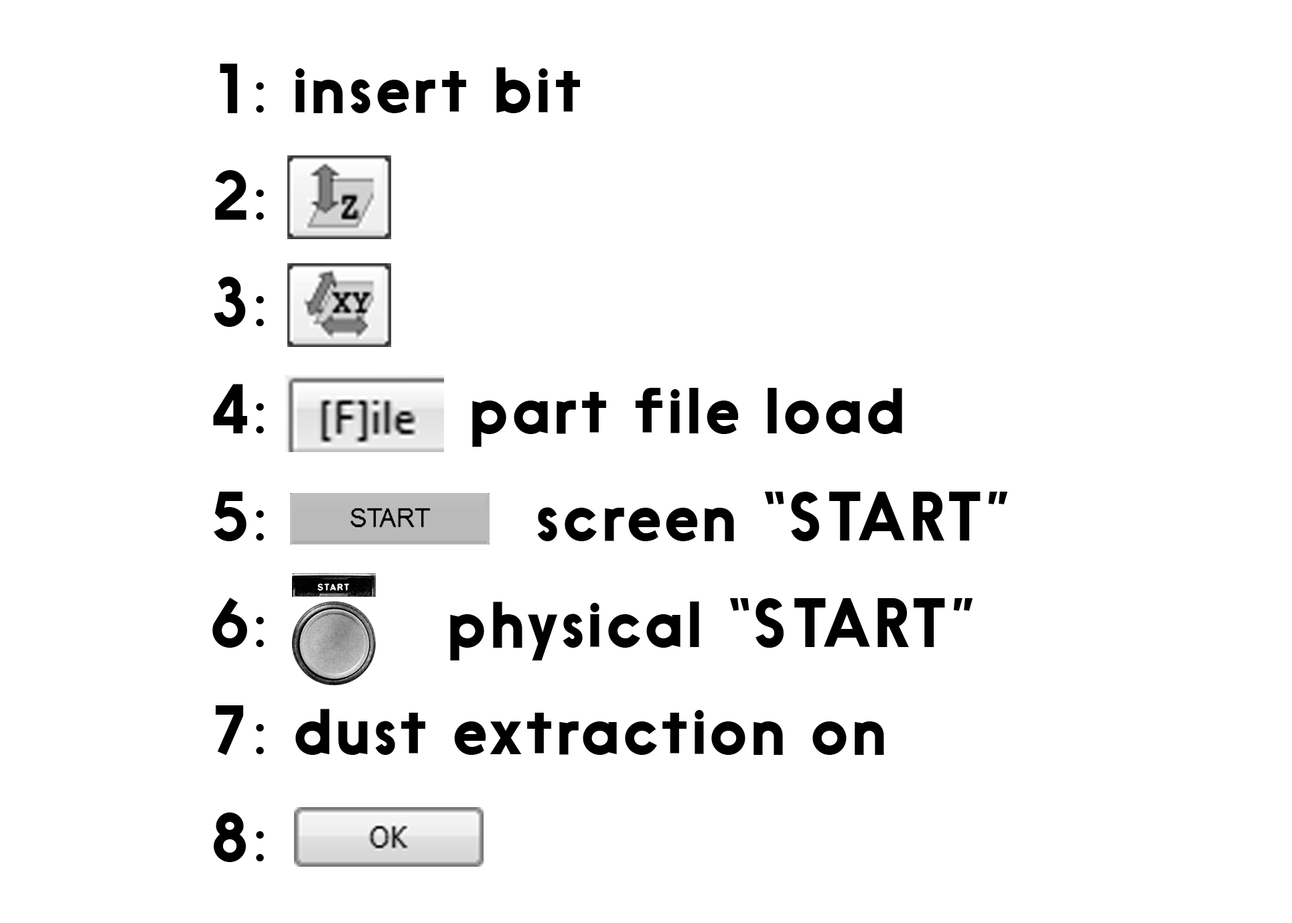
<style>
.page{position:relative;width:1292px;height:923px;background:#ffffff}
.page>*{position:absolute;margin:0}
.t1{font:65.1px/107px "Ebisu";letter-spacing:0.05em;color:#000000}
</style>
<div class="page">
<p class="t1" style="left:212px;top:64px;width:796px;height:798px">1: insert bit<br>2: <br>3: <br>4:         part file load <br>5:            screen “START”<br>6:        physical “START”<br>7: dust extraction on<br>8:</p>
</div>
